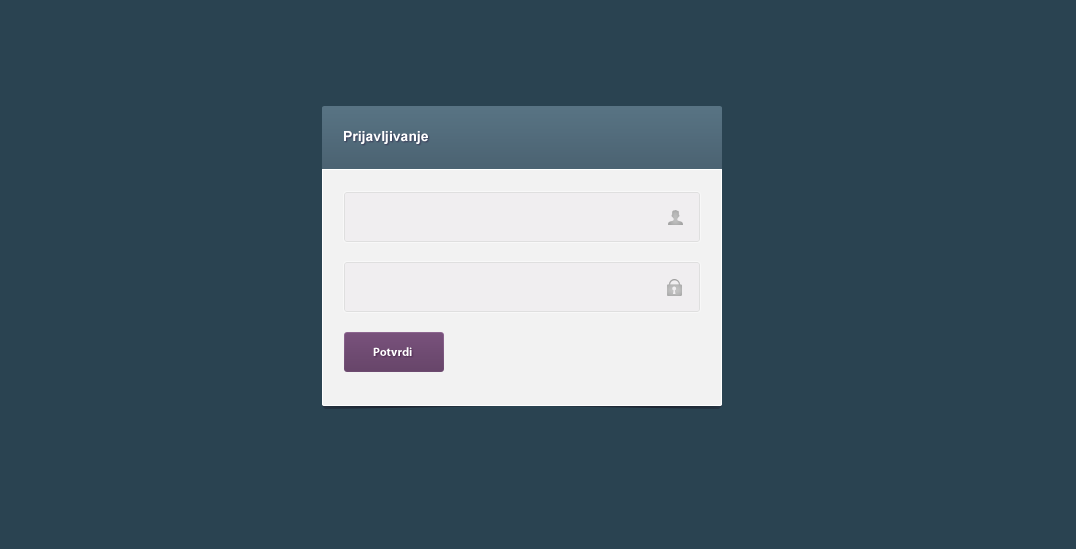
<style>
.page{position:relative;width:1076px;height:549px;background:#2a4351}
.page>*{position:absolute;margin:0}
.t1{font:14px "Arial-BoldMT";color:#ffffff}
.t2{font:12px "MyriadPro-Bold";color:#ffffff}
</style>
<div class="page">
<p class="t1" style="left:344px;top:131px;width:84px;height:13px">Prijavljivanje</p>
<p class="t2" style="left:373px;top:347px;width:39px;height:9px">Potvrdi</p>
</div>
